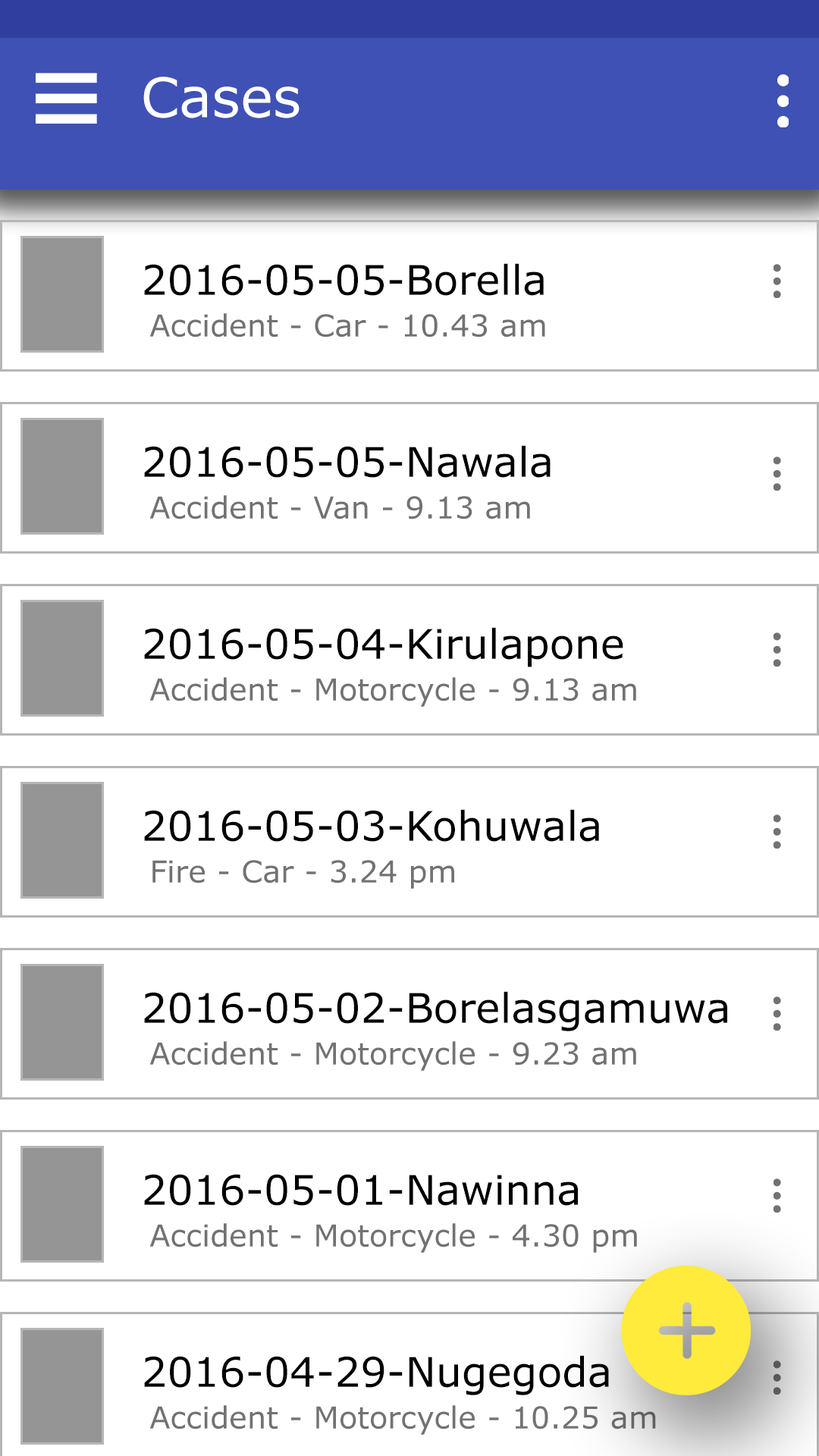
<style>
.page{position:relative;width:819px;height:1456px;background:#ffffff}
.page>*{position:absolute;margin:0}
.t1{font:54.6px "MSReferenceSansSerif";color:#ffffff}
.t2{font:40.9px "MSReferenceSansSerif";color:#000000}
.t3{font:30.3px "MSReferenceSansSerif";color:#727272}
</style>
<div class="page">
<p class="t1" style="left:143px;top:77px;width:157px;height:41px">Cases</p>
<p class="t2" style="left:144px;top:263px;width:400px;height:33px">2016-05-05-Borella</p>
<p class="t3" style="left:149px;top:313px;width:396px;height:24px">Accident - Car - 10.43 am</p>
<p class="t2" style="left:144px;top:445px;width:407px;height:33px">2016-05-05-Nawala</p>
<p class="t3" style="left:149px;top:495px;width:381px;height:24px">Accident - Van - 9.13 am</p>
<p class="t2" style="left:144px;top:627px;width:479px;height:40px">2016-05-04-Kirulapone</p>
<p class="t3" style="left:149px;top:677px;width:487px;height:30px">Accident - Motorcycle - 9.13 am</p>
<p class="t2" style="left:144px;top:809px;width:455px;height:33px">2016-05-03-Kohuwala</p>
<p class="t3" style="left:152px;top:860px;width:302px;height:29px">Fire - Car - 3.24 pm</p>
<p class="t2" style="left:144px;top:991px;width:583px;height:40px">2016-05-02-Borelasgamuwa</p>
<p class="t3" style="left:149px;top:1041px;width:487px;height:30px">Accident - Motorcycle - 9.23 am</p>
<p class="t2" style="left:144px;top:1174px;width:434px;height:32px">2016-05-01-Nawinna</p>
<p class="t3" style="left:149px;top:1223px;width:488px;height:30px">Accident - Motorcycle - 4.30 pm</p>
<p class="t2" style="left:144px;top:1355px;width:465px;height:40px">2016-04-29-Nugegoda</p>
<p class="t3" style="left:149px;top:1405px;width:507px;height:30px">Accident - Motorcycle - 10.25 am</p>
</div>
